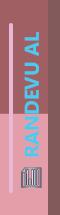
<style>
.page{position:relative;width:60px;height:215px;background:#a06063}
.page>*{position:absolute;margin:0}
.t1{font:20px "SegoeUI-Bold";color:#44ccf2}
</style>
<div class="page">
<p class="t1" style="left:24px;top:32px;width:15px;height:125px;rotate:-90deg">RANDEVU AL</p>
</div>
